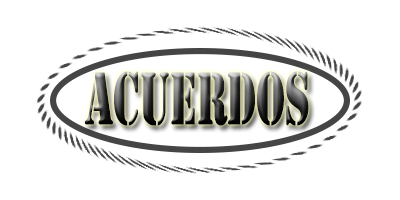
<style>
.page{position:relative;width:400px;height:200px;background:#ffffff}
.page>*{position:absolute;margin:0}
.t1{font:69.1px "StencilStd";scale:0.58 1}
</style>
<div class="page">
<p class="t1" style="left:84px;top:71px;width:225px;height:55px">acuerdos</p>
</div>
